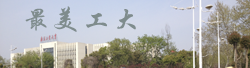
<style>
.page{position:relative;width:250px;height:68px}
.page>*{position:absolute;margin:0}
.t1{font:46.7px "STXingkai";letter-spacing:0.1em;color:#7f8c8d;font-variant:small-caps}
</style>
<div class="page">
<p class="t1" style="left:25px;top:6px;width:111px;height:26px">最美工大</p>
</div>
